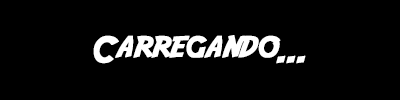
<style>
.page{position:relative;width:400px;height:100px;background:#000000}
.page>*{position:absolute;margin:0}
.t1{font:36px "Adventure";color:#ffffff;font-weight:bold}
</style>
<div class="page">
<p class="t1" style="left:93px;top:35px;width:213px;height:29px">Carregando...</p>
</div>
